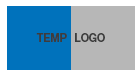
<style>
.page{position:relative;width:140px;height:78px;background:#b7b7b7}
.page>*{position:absolute;margin:0}
.t1{font:11.2px "HaasGrotDisp-65Medium";color:#3d3d3d}
</style>
<div class="page">
<p class="t1" style="left:36px;top:33px;width:69px;height:9px">TEMP    LOGO</p>
</div>
